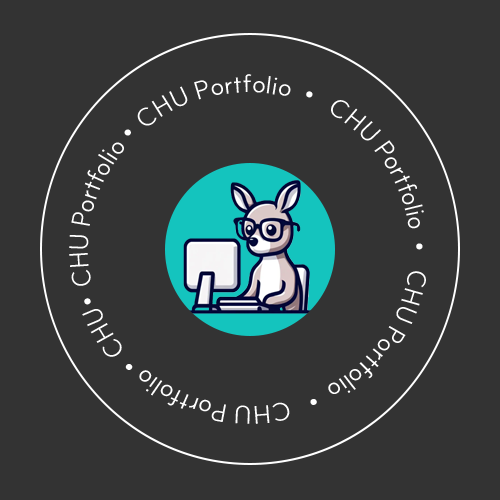
<style>
.page{position:relative;width:500px;height:500px;background:#333333}
.page>*{position:absolute;margin:0}
.t1{font:24.6px "SUIT-Regular";color:#ffffff;scale:1.04 1}
.t2{font:24.6px "Gulim";color:#ffffff;scale:1.04 1}
</style>
<div class="page">
<p class="t1" style="left:69px;top:74px;width:357px;height:350px;text-align:center"><span class="t2">• </span>CHU Portfolio <span class="t2">• </span>CHU Portfolio  <span class="t2">•  </span>CHU Portfolio  <span class="t2">•  </span>CHU Portfolio  <span class="t2">•  </span>CHU Portfolio <span class="t2">• </span>CHU Portfolio <span class="t2">•</span></p>
</div>
